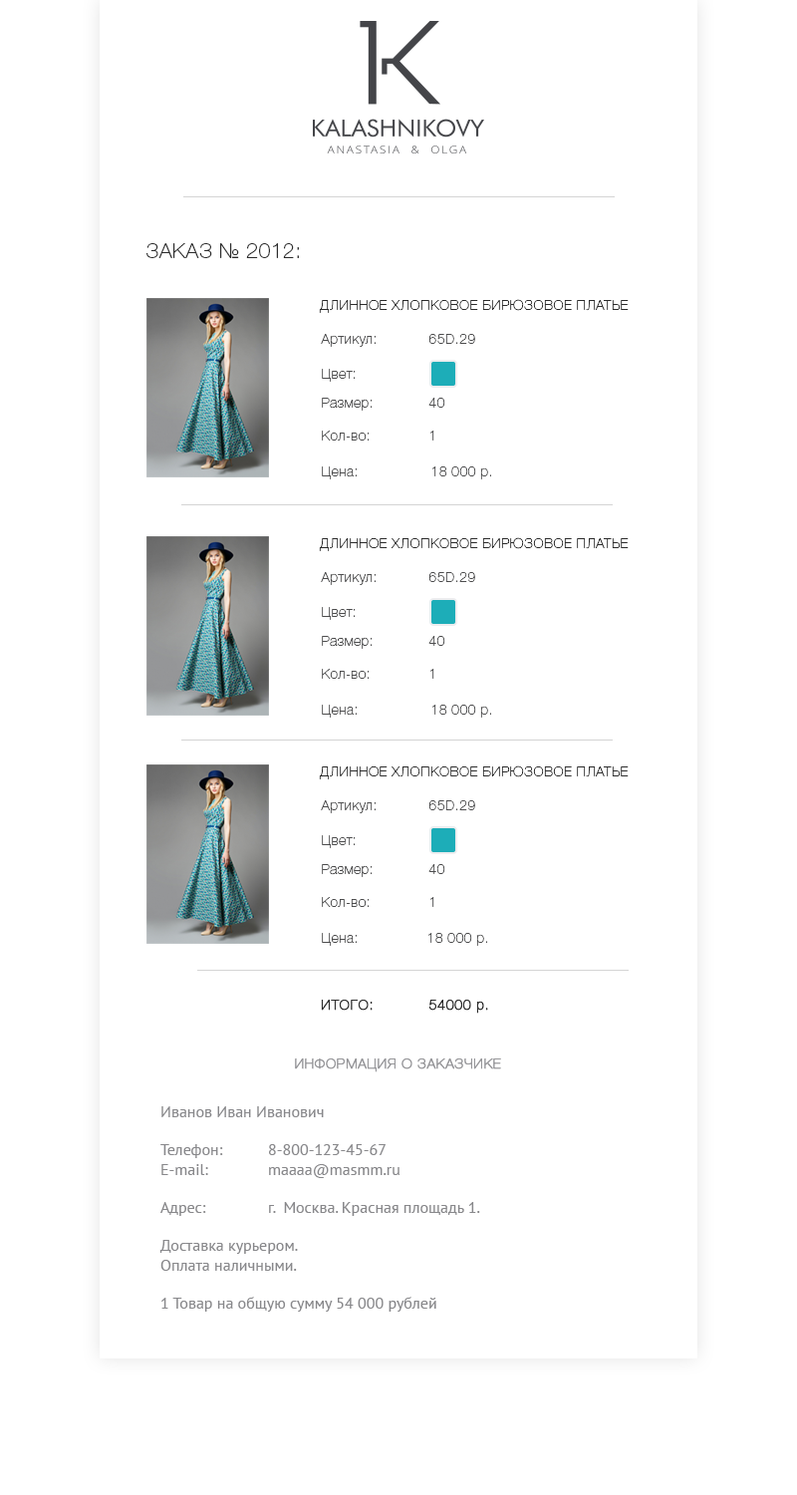
<style>
.page{position:relative;width:797px;height:1495px;background:#ffffff}
.page>*{position:absolute;margin:0}
.t1{font:20.9px "HelveticaNeueCyr-Thin";letter-spacing:0.03em;color:#2b2b2b;text-transform:uppercase}
.t2{font:14px "HelveticaNeueCyr-Thin";letter-spacing:0.03em;color:#2b2b2b;text-transform:uppercase}
.t3{font:14px "HelveticaNeueCyr-Thin";letter-spacing:0.03em;color:#4d4d4e}
.t4{font:14px "HelveticaNeueCyr-Thin";letter-spacing:0.03em;color:#2b2b2b;text-transform:uppercase;font-weight:bold}
.t5{font:14px "HelveticaNeueCyr-Thin";letter-spacing:0.03em;color:#2b2b2b;font-weight:bold}
.t6{font:14px "HelveticaNeueCyr-Thin";letter-spacing:0.03em;color:#969699;text-transform:uppercase;font-weight:bold}
.t7{font:15.9px "PTSans-Regular";color:#88888b}
</style>
<div class="page">
<p class="t1" style="left:147px;top:243px;width:152px;height:15px">Заказ № 2012:</p>
<p class="t2" style="left:319px;top:299px;width:310px;height:14px">Длинное хлопковое бирюзовое платье</p>
<p class="t3" style="left:321px;top:334px;width:154px;height:13px">Артикул:   65D.29</p>
<p class="t3" style="left:322px;top:369px;width:34px;height:13px">Цвет:</p>
<p class="t3" style="left:322px;top:398px;width:124px;height:13px">Размер:       40</p>
<p class="t3" style="left:322px;top:431px;width:113px;height:11px">Кол-во:        1</p>
<p class="t3" style="left:322px;top:467px;width:35px;height:12px">Цена:</p>
<p class="t3" style="left:432px;top:467px;width:59px;height:12px">18 000 р.</p>
<p class="t2" style="left:319px;top:537px;width:310px;height:14px">Длинное хлопковое бирюзовое платье</p>
<p class="t3" style="left:321px;top:572px;width:154px;height:13px">Артикул:   65D.29</p>
<p class="t3" style="left:322px;top:607px;width:34px;height:13px">Цвет:</p>
<p class="t3" style="left:322px;top:636px;width:124px;height:13px">Размер:       40</p>
<p class="t3" style="left:322px;top:669px;width:113px;height:11px">Кол-во:        1</p>
<p class="t3" style="left:322px;top:705px;width:35px;height:13px">Цена:</p>
<p class="t3" style="left:432px;top:705px;width:59px;height:13px">18 000 р.</p>
<p class="t2" style="left:319px;top:766px;width:310px;height:14px">Длинное хлопковое бирюзовое платье</p>
<p class="t3" style="left:321px;top:800px;width:154px;height:13px">Артикул:   65D.29</p>
<p class="t3" style="left:322px;top:835px;width:34px;height:13px">Цвет:</p>
<p class="t3" style="left:322px;top:864px;width:124px;height:13px">Размер:       40</p>
<p class="t3" style="left:322px;top:897px;width:113px;height:11px">Кол-во:        1</p>
<p class="t3" style="left:322px;top:933px;width:35px;height:13px">Цена:</p>
<p class="t3" style="left:428px;top:933px;width:59px;height:13px">18 000 р.</p>
<p class="t4" style="left:321px;top:1000px;width:167px;height:14px">Итого:   54000 <span class="t5">р.</span></p>
<p class="t6" style="left:295px;top:1059px;width:206px;height:14px">Информация о заказчике</p>
<p class="t7" style="left:159px;top:1106px;width:321px;height:206px">Иванов Иван Иванович<br><br>Телефон:  8-800-123-45-67<br>E-mail:  maaaa@masmm.ru<br><br>Адрес:  г.  Москва. Красная площадь 1.<br><br>Доставка курьером.<br>Оплата наличными.<br><br>1 Товар на общую сумму 54 000 рублей</p>
</div>
